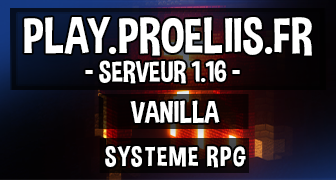
<style>
.page{position:relative;width:336px;height:180px}
.page>*{position:absolute;margin:0}
.t1{font:49.8px "DimboRegular";color:#ffffff}
.t2{font:29.3px "DimboRegular";color:#ffffff}
.t3{font:30.8px "DimboRegular";color:#ffffff}
.t4{font:27.5px "DimboRegular";letter-spacing:0.05em;color:#ffffff}
</style>
<div class="page">
<p class="t1" style="left:24px;top:17px;width:288px;height:39px">PLAY.PROELIIS.FR</p>
<p class="t2" style="left:85px;top:60px;width:155px;height:24px">- SERVEUR 1.16 -</p>
<p class="t3" style="left:130px;top:100px;width:90px;height:23px">VANILLA</p>
<p class="t4" style="left:105px;top:146px;width:141px;height:22px">SYSTEME RPG</p>
</div>
